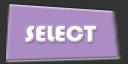
<style>
.page{position:relative;width:128px;height:64px;background:#ab8dc3}
.page>*{position:absolute;margin:0}
.t1{font:24px "Bauhaus93";color:#ffffff}
</style>
<div class="page">
<p class="t1" style="left:25px;top:26px;width:72px;height:16px">SELECT</p>
</div>
